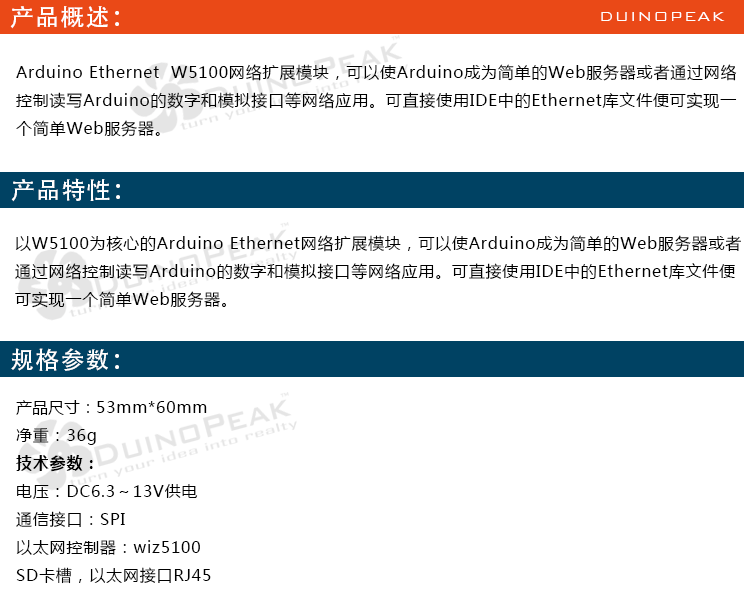
<style>
.page{position:relative;width:744px;height:606px;background:#ffffff}
.page>*{position:absolute;margin:0}
.t1{font:24px "AdobeHeitiStd-Regular";letter-spacing:0.05em;color:#ffffff}
.t2{font:18px "BankGothicBT-Light";letter-spacing:0.05em;color:#ffffff}
.t3{font:16px "MicrosoftYaHei";letter-spacing:0.05em;color:#000000}
.t4{font:16px "MicrosoftYaHei";color:#000000}
.t5{font:16px "MicrosoftYaHei-Bold";letter-spacing:0.05em;color:#000000}
</style>
<div class="page">
<p class="t1" style="left:10px;top:6px;width:109px;height:23px">产品概述：</p>
<p class="t2" style="left:601px;top:12px;width:124px;height:9px">DUINOPEAK</p>
<p class="t3" style="left:16px;top:64px;width:721px;height:73px">Arduino Ethernet  W5100网络扩展模块，可以使Arduino成为简单的Web服务器或者通过网络<br>控制读写Arduino的数字和模拟接口等网络应用。可直接使用IDE中的Ethernet库文件便可实现一<br>个简单Web服务器。</p>
<p class="t1" style="left:11px;top:178px;width:109px;height:24px">产品特性：</p>
<p class="t3" style="left:15px;top:235px;width:726px;height:73px">以W5100为核心的Arduino Ethernet网络扩展模块，可以使Arduino成为简单的Web服务器或者<br>通过网络控制读写Arduino的数字和模拟接口等网络应用。可直接使用IDE中的Ethernet库文件便<br>可实现一个简单Web服务器。</p>
<p class="t1" style="left:11px;top:348px;width:108px;height:23px">规格参数：</p>
<p class="t3" style="left:16px;top:400px;width:195px;height:184px"><span class="t4">产品尺寸：</span>53mm*60mm<br>净重：36g<br><span class="t5">技术参数：<br></span>电压：DC6.3～13V供电<br>通信接口：SPI<br>以太网控制器：wiz5100<br>SD卡槽，以太网接口RJ45</p>
</div>
